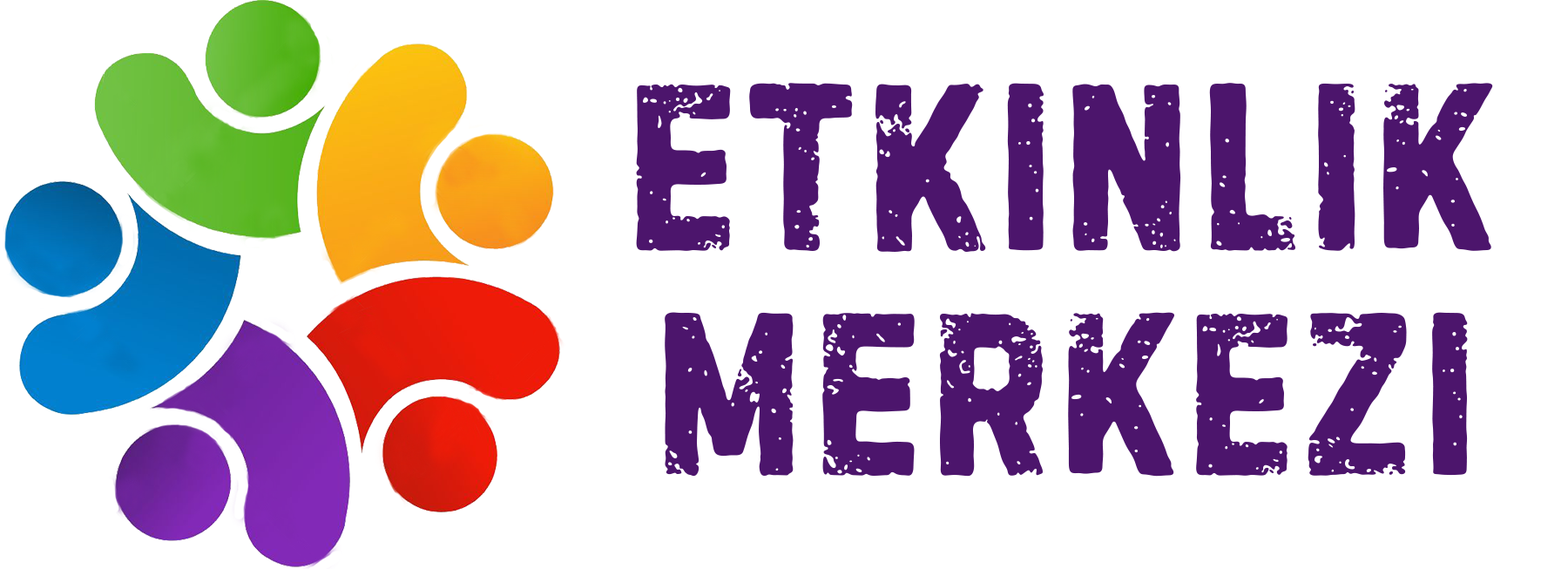
<style>
.page{position:relative;width:1568px;height:569px;background:#ffffff}
.page>*{position:absolute;margin:0}
.t1{font:256.1px "Handelson-Six";color:#4c156c}
.t2{font:249.4px "Handelson-Six";color:#4c156c}
</style>
<div class="page">
<p class="t1" style="left:636px;top:83px;width:857px;height:169px">ETKINLIK</p>
<p class="t2" style="left:665px;top:312px;width:803px;height:164px">MERKEZI</p>
</div>
